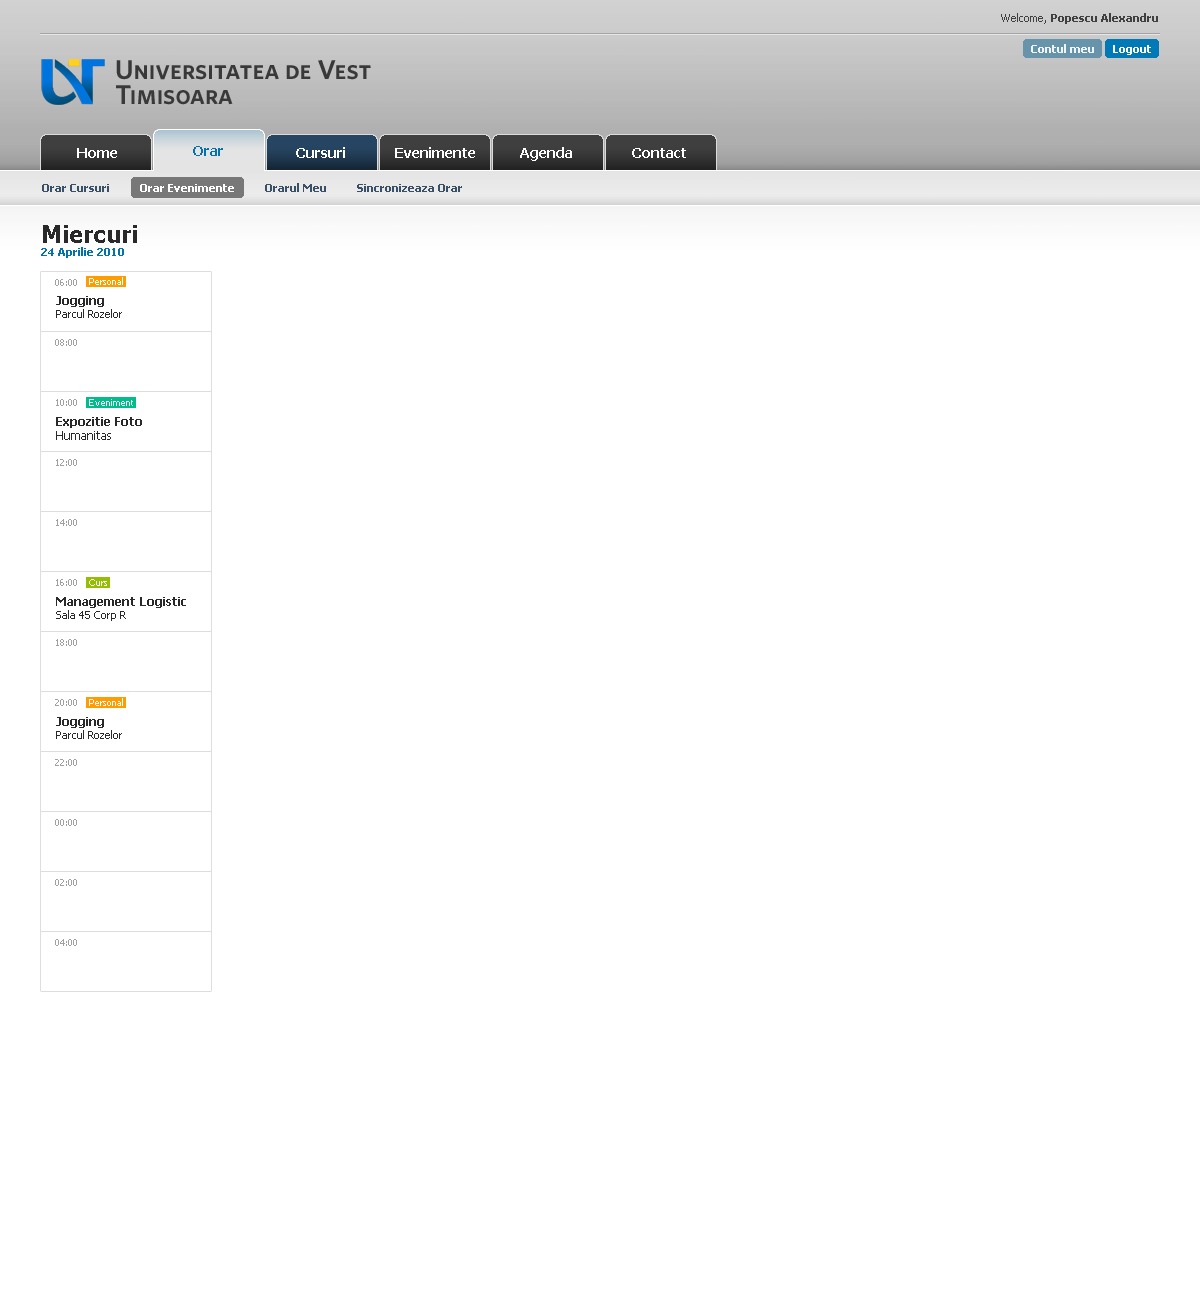
<style>
.page{position:relative;width:1200px;height:1300px;background:#ffffff}
.page>*{position:absolute;margin:0}
.t1{font:11px "Tahoma-Bold";color:#404040}
.t2{font:11px "Tahoma";color:#404040}
.t3{font:11px "Tahoma-Bold";color:#fefefe}
.t4{font:14px "Tahoma-Bold";color:#ffffff}
.t5{font:14px "Tahoma-Bold";color:#0172ac}
.t6{font:11px "Tahoma-Bold";color:#395067}
.t7{font:11px "Tahoma-Bold";color:#ffffff}
.t8{font:11px "Tahoma-Bold";color:#0172ac}
.t9{font:24px "Tahoma-Bold";color:#292929}
.t10{font:9px "Tahoma";color:#a0a0a0}
.t11{font:9px "Tahoma";color:#ffffff}
.t12{font:11px "Tahoma";color:#292929}
.t13{font:12px/18px "Tahoma-Bold";color:#292929}
.t14{font:12px "Tahoma";color:#292929}
</style>
<div class="page">
<p class="t1" style="left:1001px;top:13px;width:157px;height:11px"><span class="t2">Welcome, </span>Popescu Alexandru</p>
<p class="t3" style="left:1031px;top:44px;width:63px;height:9px;opacity:0.9">Contul meu</p>
<p class="t3" style="left:1113px;top:45px;width:38px;height:10px">Logout</p>
<p class="t4" style="left:77px;top:148px;width:40px;height:10px">Home</p>
<p class="t5" style="left:193px;top:146px;width:30px;height:10px">Orar</p>
<p class="t4" style="left:296px;top:147px;width:49px;height:11px">Cursuri</p>
<p class="t4" style="left:395px;top:147px;width:80px;height:11px">Evenimente</p>
<p class="t4" style="left:520px;top:147px;width:52px;height:14px">Agenda</p>
<p class="t4" style="left:632px;top:148px;width:54px;height:10px">Contact</p>
<p class="t6" style="left:42px;top:183px;width:420px;height:9px">Orar Cursuri          <span class="t7">Orar Evenimente</span>          Orarul Meu          Sincronizeaza Orar</p>
<p class="t8" style="left:41px;top:225px;width:96px;height:33px"><span class="t9">Miercuri<br></span>24 Aprilie 2010</p>
<p class="t10" style="left:55px;top:279px;width:22px;height:7px">06:00</p>
<p class="t11" style="left:89px;top:277px;width:34px;height:8px">Personal</p>
<p class="t12" style="left:56px;top:296px;width:66px;height:22px"><span class="t13">Jogging<br></span>Parcul Rozelor</p>
<p class="t10" style="left:55px;top:339px;width:22px;height:7px">08:00</p>
<p class="t10" style="left:56px;top:399px;width:21px;height:7px">10:00</p>
<p class="t11" style="left:89px;top:399px;width:44px;height:7px">Eveniment</p>
<p class="t13" style="left:56px;top:417px;width:86px;height:23px">Expozitie Foto<br><span class="t14">Humanitas</span></p>
<p class="t10" style="left:56px;top:459px;width:21px;height:7px">12:00</p>
<p class="t10" style="left:56px;top:519px;width:21px;height:7px">14:00</p>
<p class="t10" style="left:56px;top:579px;width:21px;height:7px">16:00</p>
<p class="t11" style="left:89px;top:579px;width:18px;height:7px">Curs</p>
<p class="t13" style="left:56px;top:597px;width:130px;height:24px">Management Logistic<br><span class="t12">Sala 45 Corp R</span></p>
<p class="t10" style="left:56px;top:639px;width:21px;height:7px">18:00</p>
<p class="t10" style="left:55px;top:699px;width:22px;height:7px">20:00</p>
<p class="t11" style="left:89px;top:698px;width:34px;height:8px">Personal</p>
<p class="t12" style="left:56px;top:717px;width:66px;height:22px"><span class="t13">Jogging<br></span>Parcul Rozelor</p>
<p class="t10" style="left:55px;top:759px;width:22px;height:7px">22:00</p>
<p class="t10" style="left:55px;top:819px;width:22px;height:7px">00:00</p>
<p class="t10" style="left:55px;top:879px;width:22px;height:7px">02:00</p>
<p class="t10" style="left:55px;top:939px;width:22px;height:7px">04:00</p>
</div>
